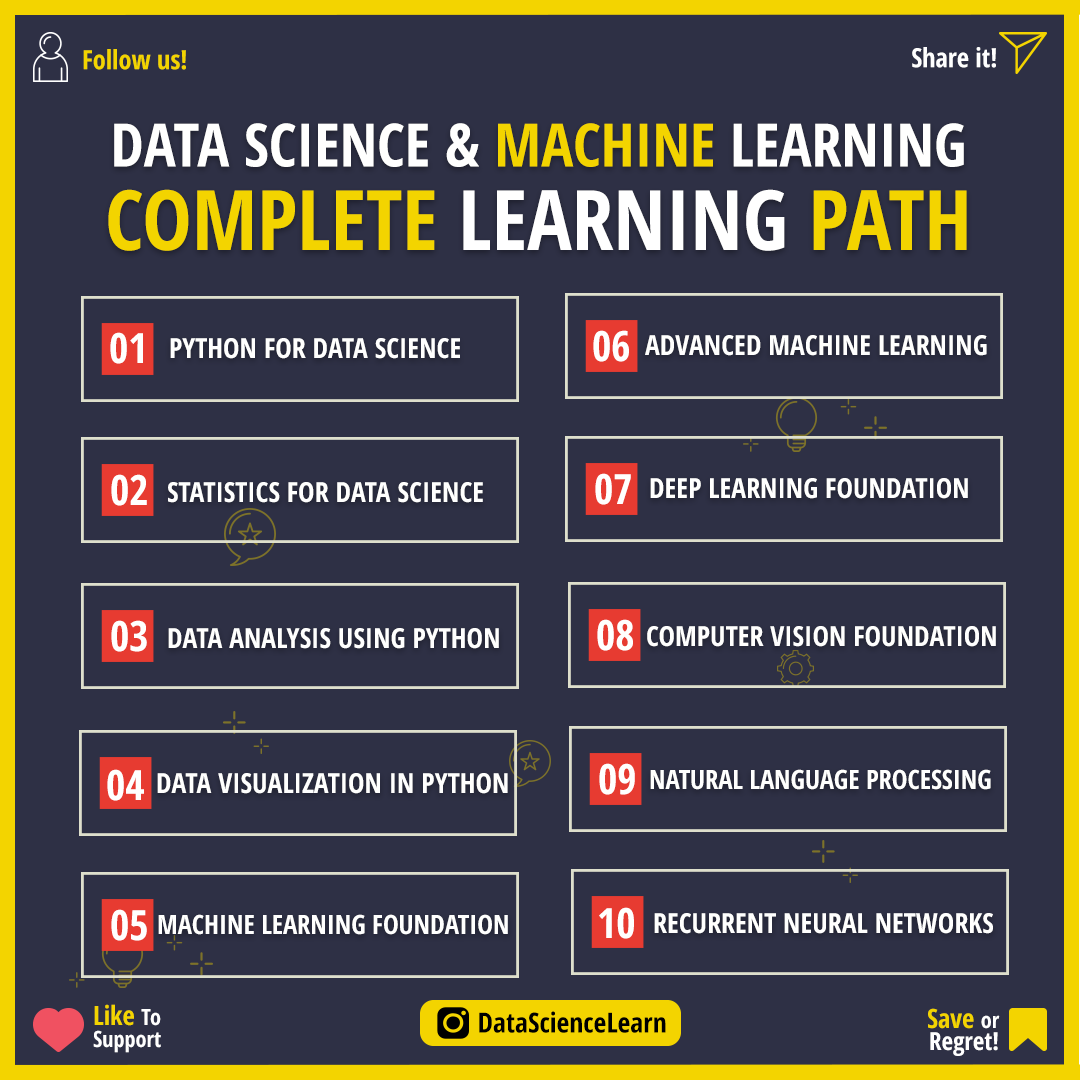
<style>
.page{position:relative;width:1080px;height:1080px;background:#2e3045}
.page>*{position:absolute;margin:0}
.t1{font:26.4px "OpenSans-CondensedBold";color:#f3d400}
.t2{font:26.4px "OpenSans-CondensedBold";color:#ffffff}
.t3{font:59.7px/83.3px "OpenSans-CondensedBold";color:#fffffe}
.t4{font:59.7px/83.3px "OpenSans-CondensedBold";color:#f3d400}
.t5{font:83.3px/83.3px "OpenSans-CondensedBold";color:#f3d400}
.t6{font:83.3px/83.3px "OpenSans-CondensedBold";color:#ffffff}
.t7{font:41.7px "OpenSans-CondensedBold";color:#fffffe}
.t8{font:27.8px "OpenSans-CondensedBold";color:#fffffe}
.t9{font:26.4px "OpenSans-CondensedBold";color:#fffffe}
.t10{font:22.2px/22.2px "OpenSans-CondensedBold";color:#ffffff}
.t11{font:26.4px/22.2px "OpenSans-CondensedBold";color:#f3d400}
.t12{font:27.8px "OpenSans-CondensedBold";color:#000000}
.t13{font:25px/22.2px "OpenSans-CondensedBold";color:#ffffff}
</style>
<div class="page">
<p class="t1" style="left:83px;top:49px;width:103px;height:21px">Follow us!</p>
<p class="t2" style="left:912px;top:47px;width:84px;height:21px">Share it!</p>
<p class="t3" style="left:108px;top:123px;width:859px;height:128px;text-align:center">DATA SCIENCE &amp; <span class="t4">MACHINE </span>LEARNING<br><span class="t5">COMPLETE </span><span class="t6">LEARNING </span><span class="t5">PATH</span></p>
<p class="t7" style="left:110px;top:332px;width:33px;height:32px">01</p>
<p class="t8" style="left:170px;top:338px;width:290px;height:21px">PYTHON FOR DATA SCIENCE</p>
<p class="t7" style="left:593px;top:330px;width:36px;height:32px">06</p>
<p class="t8" style="left:645px;top:335px;width:342px;height:21px">ADVANCED MACHINE LEARNING</p>
<p class="t7" style="left:595px;top:473px;width:36px;height:32px">07</p>
<p class="t7" style="left:111px;top:474px;width:36px;height:32px">02</p>
<p class="t8" style="left:168px;top:482px;width:315px;height:21px">STATISTICS FOR DATA SCIENCE</p>
<p class="t8" style="left:650px;top:478px;width:318px;height:21px">DEEP LEARNING FOUNDATION</p>
<p class="t7" style="left:111px;top:620px;width:36px;height:32px">03</p>
<p class="t8" style="left:168px;top:628px;width:331px;height:21px">DATA ANALYSIS USING PYTHON</p>
<p class="t7" style="left:597px;top:619px;width:36px;height:32px">08</p>
<p class="t8" style="left:647px;top:626px;width:349px;height:21px">COMPUTER VISION FOUNDATION</p>
<p class="t7" style="left:107px;top:769px;width:37px;height:32px">04</p>
<p class="t8" style="left:157px;top:773px;width:351px;height:21px">DATA VISUALIZATION IN PYTHON</p>
<p class="t7" style="left:599px;top:763px;width:36px;height:32px">09</p>
<p class="t9" style="left:650px;top:769px;width:341px;height:21px">NATURAL LANGUAGE PROCESSING</p>
<p class="t7" style="left:111px;top:909px;width:36px;height:32px">05</p>
<p class="t9" style="left:158px;top:914px;width:350px;height:21px">MACHINE LEARNING FOUNDATION</p>
<p class="t7" style="left:599px;top:907px;width:35px;height:32px">10</p>
<p class="t8" style="left:654px;top:913px;width:339px;height:21px">RECURRENT NEURAL NETWORKS</p>
<p class="t10" style="left:93px;top:1004px;width:68px;height:49px"><span class="t11">Like </span>To<br>Support</p>
<p class="t12" style="left:479px;top:1011px;width:187px;height:22px">DataScienceLearn</p>
<p class="t13" style="left:928px;top:1008px;width:72px;height:48px;text-align:right"><span class="t11">Save </span><span class="t10">or<br></span>Regret!</p>
</div>
